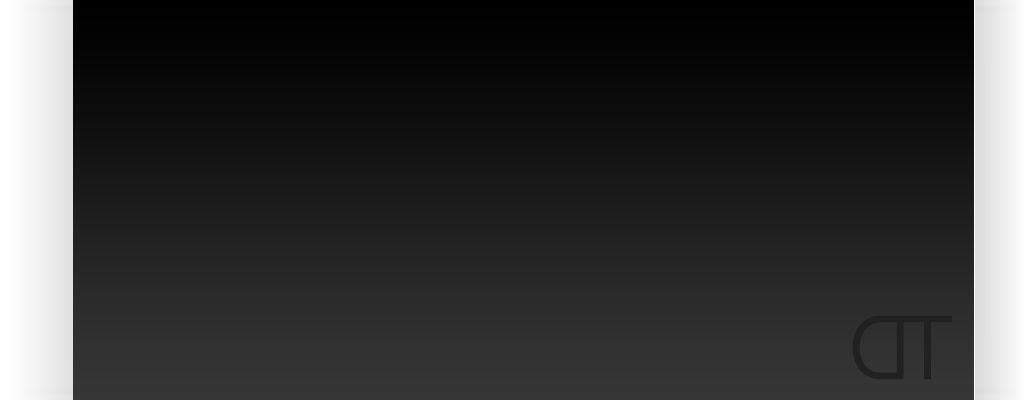
<style>
.page{position:relative;width:1027px;height:400px}
.page>*{position:absolute;margin:0}
.t1{font:114.3px "SinhalaSangamMN";color:#222121}
</style>
<div class="page">
<p class="t1" style="left:852px;top:315px;width:52px;height:65px;rotate:180deg">D</p>
<p class="t1" style="left:903px;top:315px;width:49px;height:65px">T</p>
</div>
